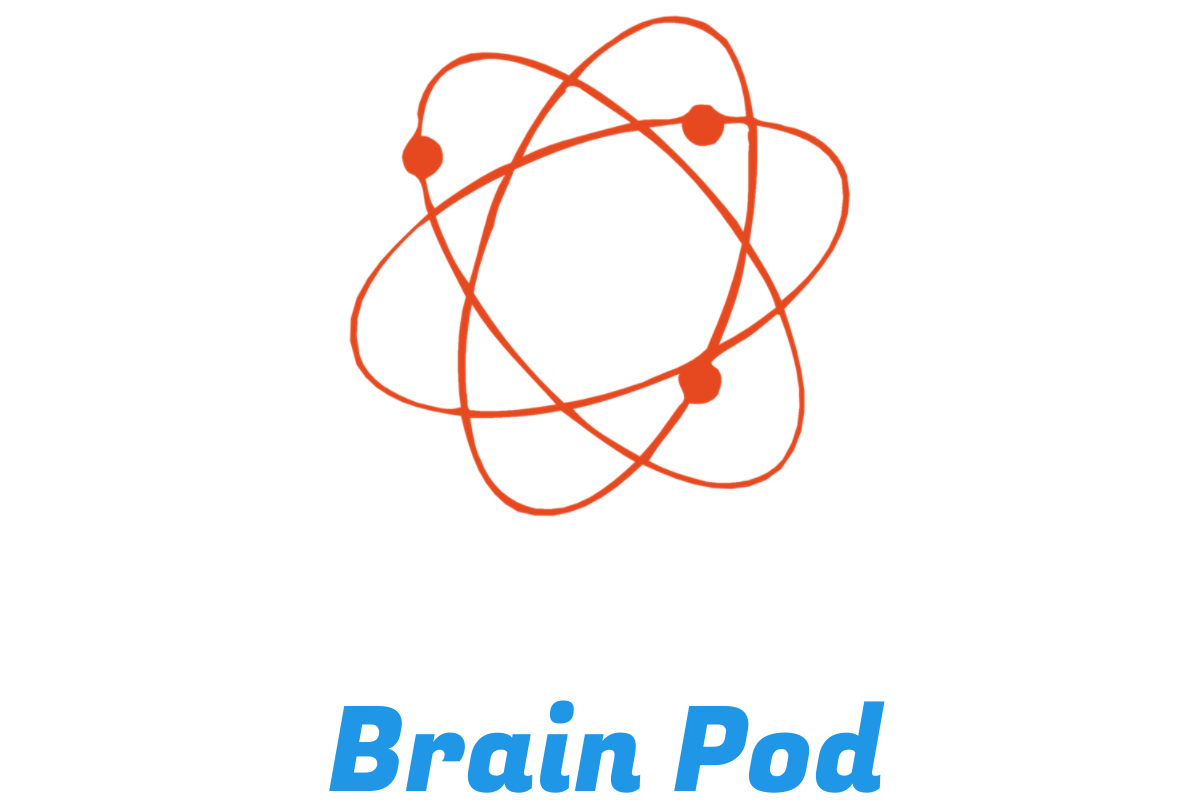
<style>
.page{position:relative;width:1200px;height:800px;background:#ffffff}
.page>*{position:absolute;margin:0}
.t1{font:118px "FugazOne-Regular";color:#1f96e6}
</style>
<div class="page">
<p class="t1" style="left:329px;top:700px;width:556px;height:93px">Brain Pod</p>
</div>
